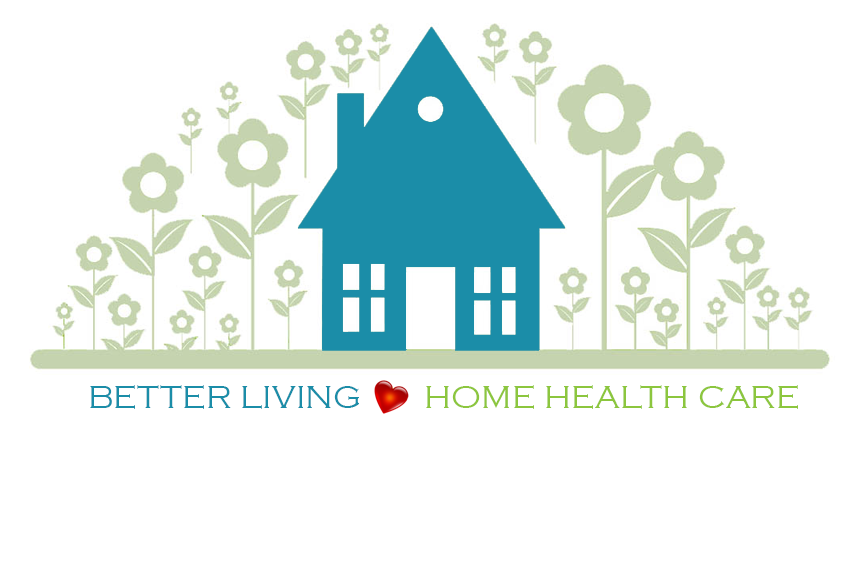
<style>
.page{position:relative;width:857px;height:563px;background:#ffffff}
.page>*{position:absolute;margin:0}
.t1{font:33.3px "CopperplateGothic-Light";color:#1b8da8}
.t2{font:33.3px "CopperplateGothic-Light";color:#8cc63e}
</style>
<div class="page">
<p class="t1" style="left:90px;top:385px;width:269px;height:24px">BETTER LIVING</p>
<p class="t2" style="left:426px;top:385px;width:372px;height:24px">HOME HEALTH CARE</p>
</div>
